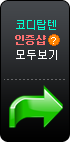
<style>
.page{position:relative;width:70px;height:142px}
.page>*{position:absolute;margin:0}
.t1{font:12px/15px "morris9";color:#00ffd2}
.t2{font:12px/15px "morris9";letter-spacing:-0.1em;color:#fc7070;font-weight:bold}
.t3{font:12px/15px "morris9";color:#ffffff}
</style>
<div class="page">
<p class="t1" style="left:15px;top:20px;width:42px;height:40px;text-align:center">코디탑텐<br><span class="t2">인증샵   <br></span><span class="t3">모두보기</span></p>
</div>
